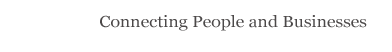
<style>
.page{position:relative;width:392px;height:52px;background:#ffffff}
.page>*{position:absolute;margin:0}
.t1{font:16px "Georgia";color:#4c4949;scale:1.1 1}
</style>
<div class="page">
<p class="t1" style="left:100px;top:15px;width:267px;height:16px">Connecting People and Businesses</p>
</div>
